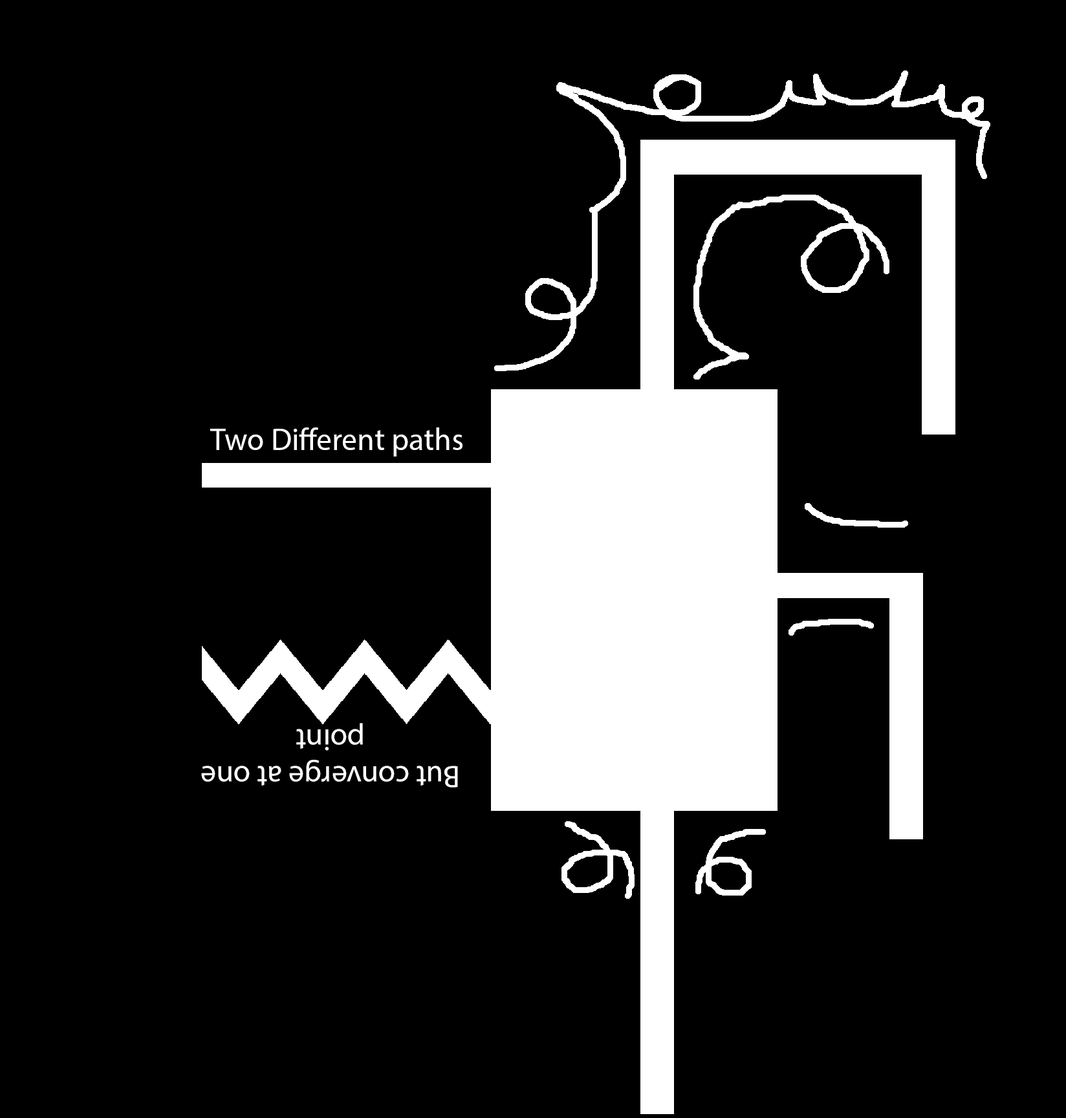
<style>
.page{position:relative;width:1066px;height:1118px;background:#000000}
.page>*{position:absolute;margin:0}
.t1{font:31.1px "MyriadPro-Regular";color:#ffffff}
</style>
<div class="page">
<p class="t1" style="left:210px;top:428px;width:253px;height:29px">Two Different paths</p>
<p class="t1" style="left:201px;top:723px;width:257px;height:65px;rotate:180deg">But converge at one point</p>
</div>
